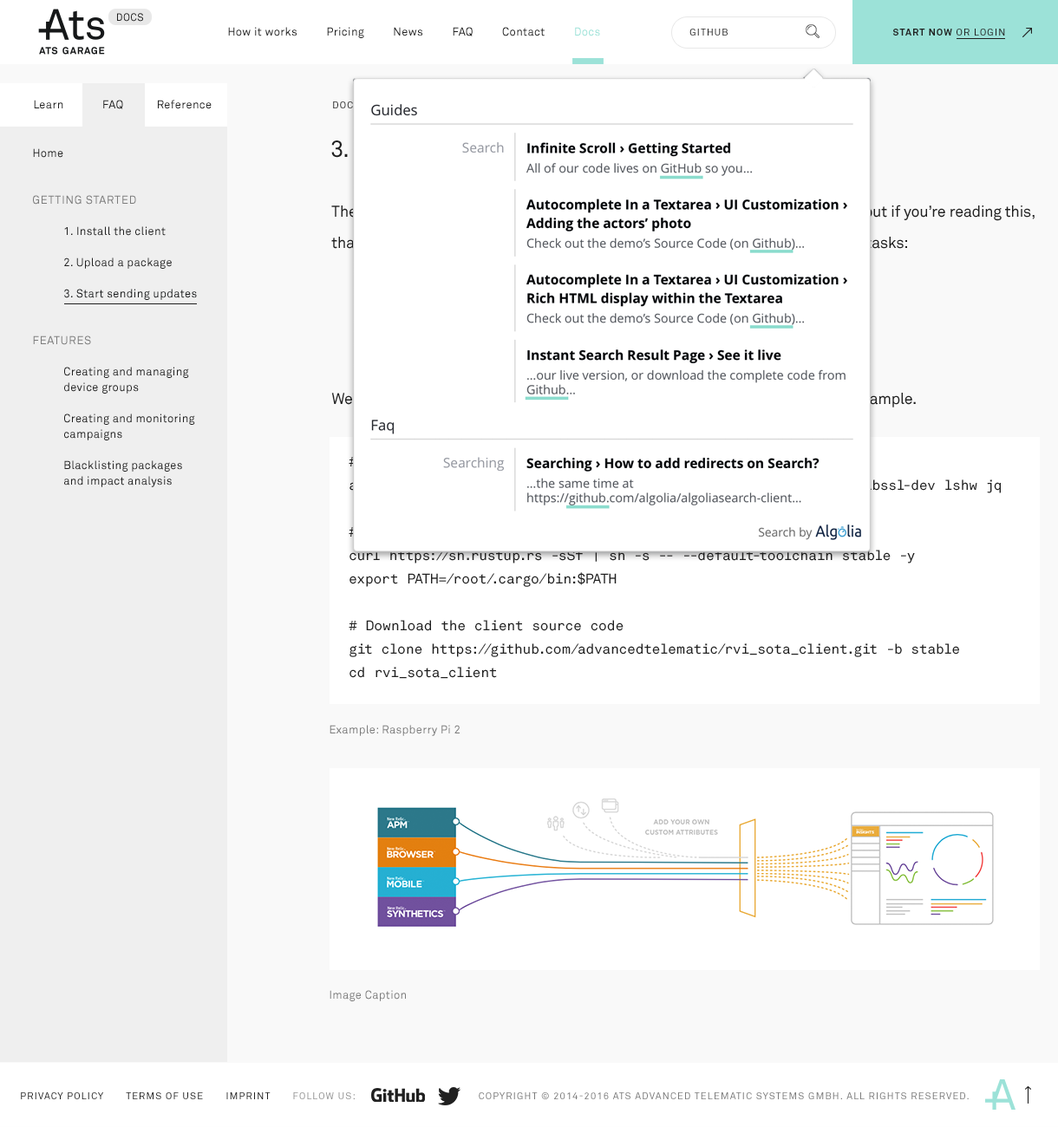
<style>
.page{position:relative;width:1058px;height:1127px;background:#ffffff}
.page>*{position:absolute;margin:0}
.t1{font:10.4px "AkkuratStd-Mono";letter-spacing:0.05em;color:#202020;text-transform:uppercase}
.t2{font:11.3px "AkkuratStd";letter-spacing:0.025em;color:#202020}
.t3{font:11.3px "AkkuratStd";letter-spacing:0.025em;color:#9ce2d8}
.t4{font:9.5px "AkkuratStd";letter-spacing:0.1em;color:#202020;text-transform:uppercase}
.t5{font:9.5px "AkkuratStd-Bold";letter-spacing:0.1em;color:#202020;text-transform:uppercase}
.t6{font:11.3px "AkkuratStd";letter-spacing:0.025em;color:#202020;text-transform:uppercase}
.t7{font:11.3px/15.6px "AkkuratStd";letter-spacing:0.025em;color:#202020}
.t8{font:11.3px/15.6px "AkkuratStd";letter-spacing:0.05em;color:#7b7b7b;text-transform:uppercase}
.t9{font:11.3px/15.6px "AkkuratStd";letter-spacing:0.025em;color:#161819}
.t10{font:13.9px/23.4px "AkkuratStd-Mono";letter-spacing:-0.01em;color:#202020}
.t11{font:11.3px "AkkuratStd";letter-spacing:0.025em;color:#7b7b7b}
.t12{font:9.5px "AkkuratStd";letter-spacing:0.1em;color:#7b7b7b;text-transform:uppercase}
.t13{font:9.5px "AkkuratStd";letter-spacing:0.1em;color:#939393;text-transform:uppercase}
</style>
<div class="page">
<p class="t1" style="left:117px;top:13px;width:26px;height:9px">Docs</p>
<p class="t2" style="left:228px;top:27px;width:372px;height:11px">How it works          Pricing          News          FAQ          Contact          <span class="t3">Docs</span></p>
<p class="t4" style="left:689px;top:29px;width:38px;height:7px">github</p>
<p class="t5" style="left:892px;top:29px;width:113px;height:7px">Start now<span class="t4"> or login</span></p>
<p class="t2" style="left:34px;top:100px;width:29px;height:9px">Learn</p>
<p class="t6" style="left:103px;top:100px;width:20px;height:9px">faq</p>
<p class="t2" style="left:158px;top:100px;width:54px;height:9px">Reference</p>
<p class="t7" style="left:33px;top:148px;width:164px;height:339px">Home<br><br><br><span class="t8">Getting Started<br></span><br> 1. Install the client<br><br> 2. Upload a package<br><br><span class="t9"> 3. Start sending updates<br><br><br></span><span class="t8">Features<br></span><br> Creating and managing <br> device groups<br><br> Creating and monitoring <br> campaigns<br><br> Blacklisting packages <br> and impact analysis</p>
<p class="t10" style="left:349px;top:456px;width:652px;height:223px"># Install the basic build tools and dev libraries needed<br>apt-get install -y autoconf git libdbus-1-dev libtool openssl libssl-dev lshw jq<br><br># Install Rust<br>curl https://sh.rustup.rs -sSf | sh -s -- --default-toolchain stable -y<br>export PATH=/root/.cargo/bin:$PATH<br><br># Download the client source code<br>git clone https://github.com/advancedtelematic/rvi_sota_client.git -b stable<br>cd rvi_sota_client</p>
<p class="t11" style="left:329px;top:725px;width:131px;height:11px">Example: Raspberry Pi 2</p>
<p class="t11" style="left:329px;top:990px;width:77px;height:11px">Image Caption</p>
<p class="t12" style="left:21px;top:1093px;width:948px;height:6px"><span class="t4">Privacy Policy       Terms of Use       imprint       </span><span class="t13">follow us:                                       </span>Copyright © 2014-2016 ATS Advanced telematic systems gmbh. All rights reserved.</p>
</div>
